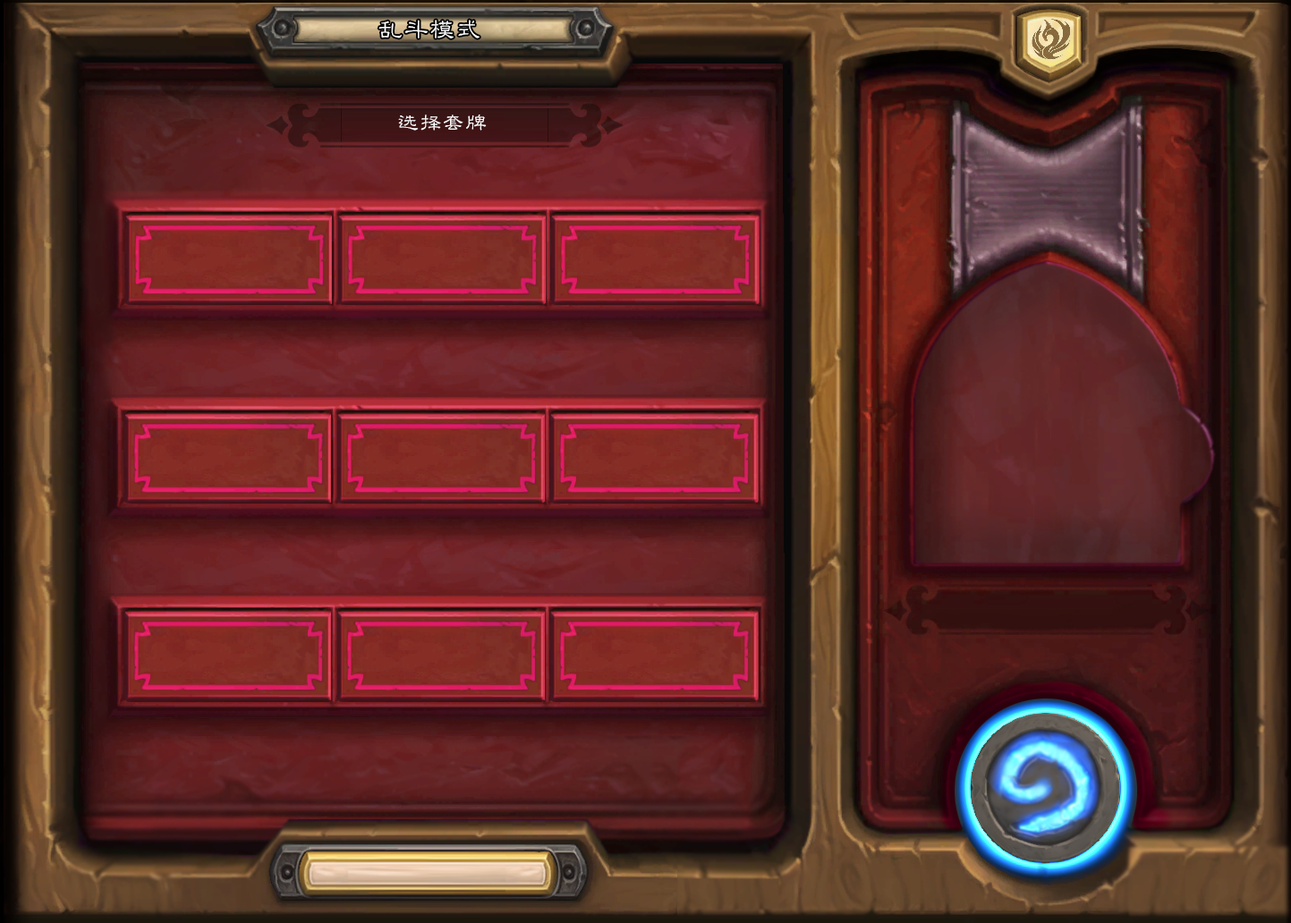
<style>
.page{position:relative;width:1291px;height:923px}
.page>*{position:absolute;margin:0}
.t1{font:25.1px "GBJenLei-Medium";letter-spacing:0.05em;color:#ffffff}
.t2{font:21.5px "GBJenLei-Medium";letter-spacing:0.05em;color:#ffffff}
</style>
<div class="page">
<p class="t1" style="left:379px;top:20px;width:101px;height:18px">乱斗模式</p>
<p class="t2" style="left:398px;top:115px;width:89px;height:16px">选择套牌</p>
</div>
